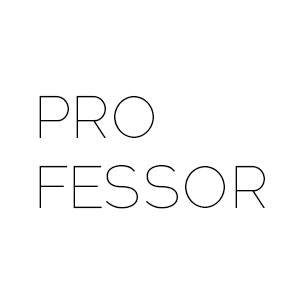
<style>
.page{position:relative;width:300px;height:300px;background:#ffffff}
.page>*{position:absolute;margin:0}
.t1{font:59.8px/69.3px "Raleway-Thin";letter-spacing:0.037em;color:#010101}
</style>
<div class="page">
<p class="t1" style="left:39px;top:95px;width:226px;height:114px">PRO<br>FESSOR</p>
</div>
